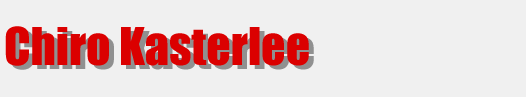
<style>
.page{position:relative;width:526px;height:97px;background:#f0f0f0}
.page>*{position:absolute;margin:0}
.t1{font:48px "Impact";color:#db0000}
</style>
<div class="page">
<p class="t1" style="left:5px;top:26px;width:304px;height:40px">Chiro Kasterlee</p>
</div>
